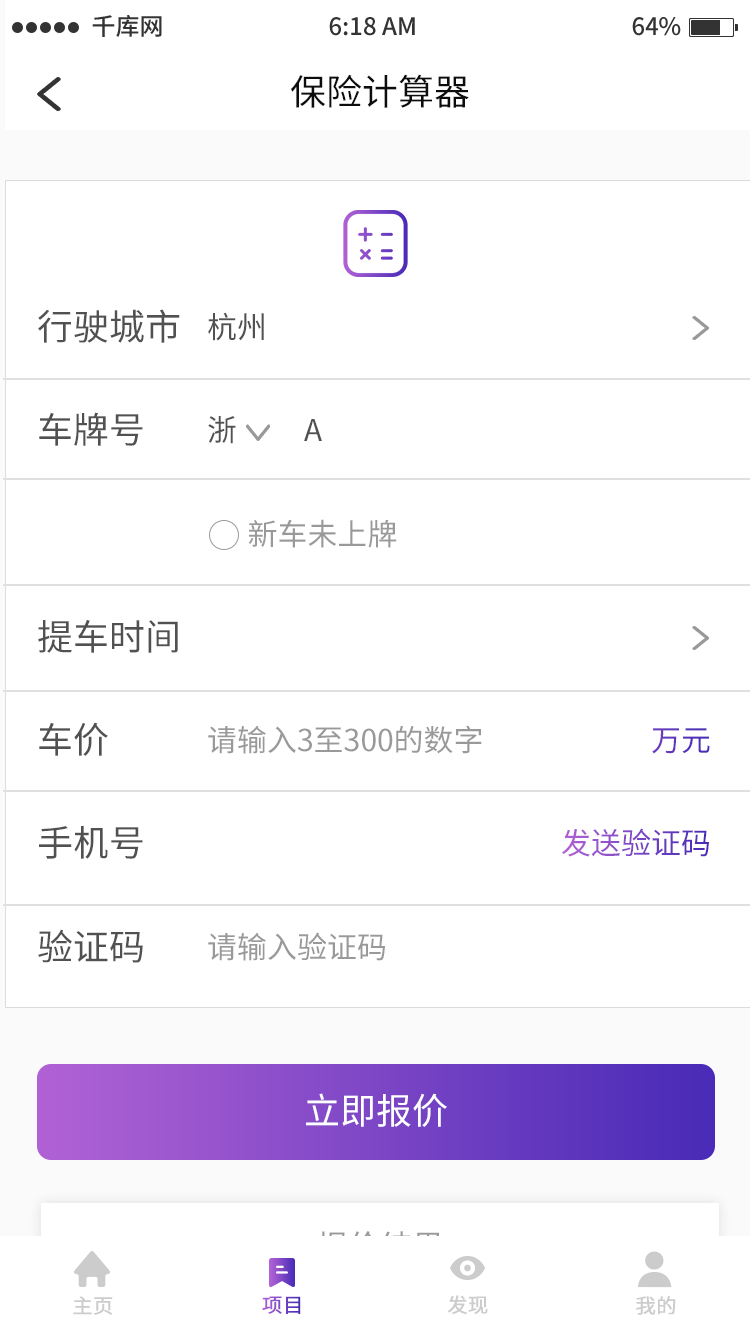
<style>
.page{position:relative;width:750px;height:1334px;background:#ffffff}
.page>*{position:absolute;margin:0}
.t1{font:36px "NotoSansHans-Regular";color:#0d0d0d}
.t2{font:36px/103.2px "NotoSansHans-Regular";color:#525050}
.t3{font:30px/103.2px "NotoSansHans-Regular";color:#999999}
.t4{font:30px/103.2px "NotoSansHans-Regular";color:#525050}
.t5{font:30px/103.2px "NotoSansHans-Regular"}
.t6{font:36px "NotoSansHans-Regular";color:#ffffff}
.t7{font:20px "NotoSansHans-Regular";color:#cccccc;font-weight:bold}
.t8{font:20px "NotoSansHans-Regular";font-weight:bold}
</style>
<div class="page">
<p class="t1" style="left:291px;top:74px;width:178px;height:34px">保险计算器</p>
<p class="t2" style="left:38px;top:309px;width:142px;height:654px">行驶城市<br>车牌号<br><br>提车时间<br>车价<br>手机号<br>验证码</p>
<p class="t3" style="left:208px;top:312px;width:274px;height:649px"><span class="t4">杭州<br>浙          A<br>      </span>新车未上牌<br><br>请输入3至300的数字<br><br>请输入验证码</p>
<p class="t5" style="left:562px;top:728px;width:148px;height:129px;text-align:right">万元<br>发送验证码</p>
<p class="t6" style="left:306px;top:1093px;width:141px;height:34px">立即报价</p>
<p class="t7" style="left:73px;top:1296px;width:40px;height:19px">主页</p>
<p class="t8" style="left:262px;top:1296px;width:39px;height:18px">项目</p>
<p class="t7" style="left:447px;top:1295px;width:41px;height:19px">发现</p>
<p class="t7" style="left:636px;top:1296px;width:40px;height:19px">我的</p>
</div>
